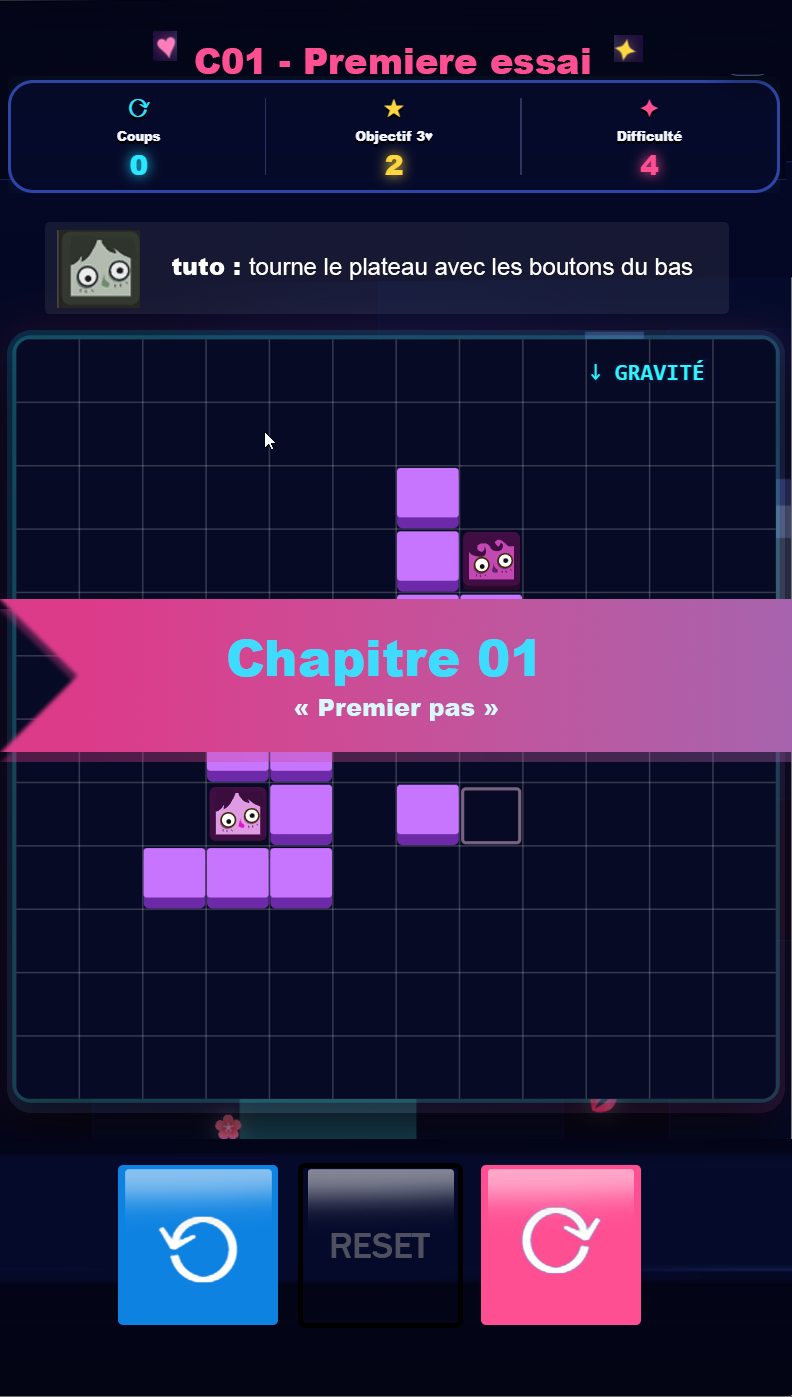
<style>
.page{position:relative;width:792px;height:1397px;background:#060a24}
.page>*{position:absolute;margin:0}
.t1{font:36px "Arial-Black";color:#ff4f93}
.t2{font:24px "ArialMT";color:#ffffff}
.t3{font:24px "Arial-Black";color:#ffffff}
.t4{font:50px "Arial-Black";color:#3ddcff}
.t5{font:24px "Arial-Black";color:#d8f8ff}
.t6{font:36.6px "FranklinGothic-Medium";color:#4e505f}
</style>
<div class="page">
<p class="t1" style="left:195px;top:48px;width:395px;height:26px">C01 - Premiere essai</p>
<p class="t2" style="left:172px;top:257px;width:521px;height:23px"><span class="t3">tuto : </span>tourne le plateau avec les boutons du bas</p>
<p class="t4" style="left:228px;top:639px;width:307px;height:47px">Chapitre 01</p>
<p class="t5" style="left:294px;top:699px;width:204px;height:22px">« Premier pas »</p>
<p class="t6" style="left:331px;top:1233px;width:99px;height:25px">RESET</p>
</div>
